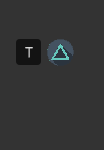
<style>
.page{position:relative;width:104px;height:150px;background:#333333}
.page>*{position:absolute;margin:0}
.t1{font:14px "Quicksand-Light"}
</style>
<div class="page">
<p class="t1" style="left:25px;top:47px;width:8px;height:11px">T</p>
</div>
